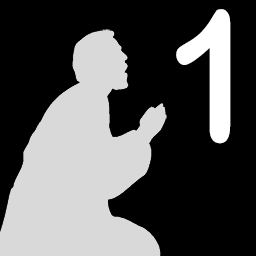
<style>
.page{position:relative;width:256px;height:256px;background:#000000}
.page>*{position:absolute;margin:0}
.t1{font:182.4px "ArialRoundedMTBold";letter-spacing:-0.4em;color:#ffffff;font-variant:small-caps;scale:0.83 1}
</style>
<div class="page">
<p class="t1" style="left:176px;top:9px;width:55px;height:135px">1</p>
</div>
